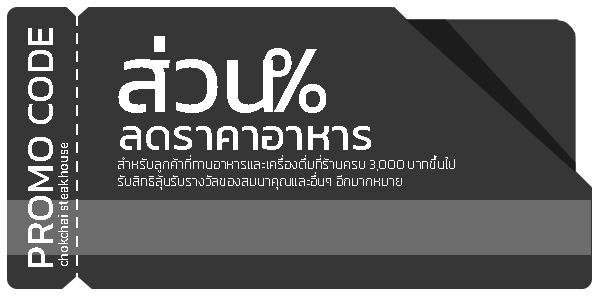
<style>
.page{position:relative;width:600px;height:300px;background:#363636}
.page>*{position:absolute;margin:0}
.t1{font:40.1px "Kanit-Regular";color:#ffffff}
.t2{font:97.2px "Kanit-Regular";color:#ffffff}
.t3{font:44.3px "Kanit-Regular";color:#ffffff}
.t4{font:13.6px "Kanit-Regular";color:#ffffff}
.t5{font:13.6px "Kanit-Thin";color:#ffffff}
</style>
<div class="page">
<p class="t1" style="left:28px;top:28px;width:25px;height:239px;rotate:-90deg">PROMO CODE</p>
<p class="t2" style="left:118px;top:36px;width:155px;height:77px">ส่วน</p>
<p class="t2" style="left:264px;top:48px;width:62px;height:65px">%</p>
<p class="t3" style="left:120px;top:126px;width:251px;height:24px">ลดราคาอาหาร</p>
<p class="t4" style="left:58px;top:143px;width:10px;height:123px;rotate:-90deg">chokchai steakhouse</p>
<p class="t5" style="left:118px;top:155px;width:337px;height:18px">สำหรับลูกค้าที่ทานอาหารและเครื่องดื่มที่ร้านครบ 3,000 บาทขึ้นไป ...</p>
<p class="t5" style="left:118px;top:172px;width:284px;height:18px">รับสิทธิลุ้นรับรางวัลของสมนาคุณและอื่นๆ อีกมากหมาย</p>
</div>
